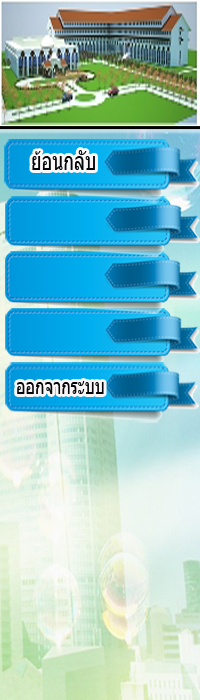
<style>
.page{position:relative;width:200px;height:700px}
.page>*{position:absolute;margin:0}
.t1{font:25.2px "Tahoma";color:#030508;scale:0.71 1}
.t2{font:22.4px "Tahoma";color:#030508;scale:0.71 1}
</style>
<div class="page">
<p class="t1" style="left:32px;top:150px;width:63px;height:20px">ย้อนกลับ</p>
<p class="t2" style="left:17px;top:381px;width:87px;height:13px">ออกจากระบบ</p>
</div>
